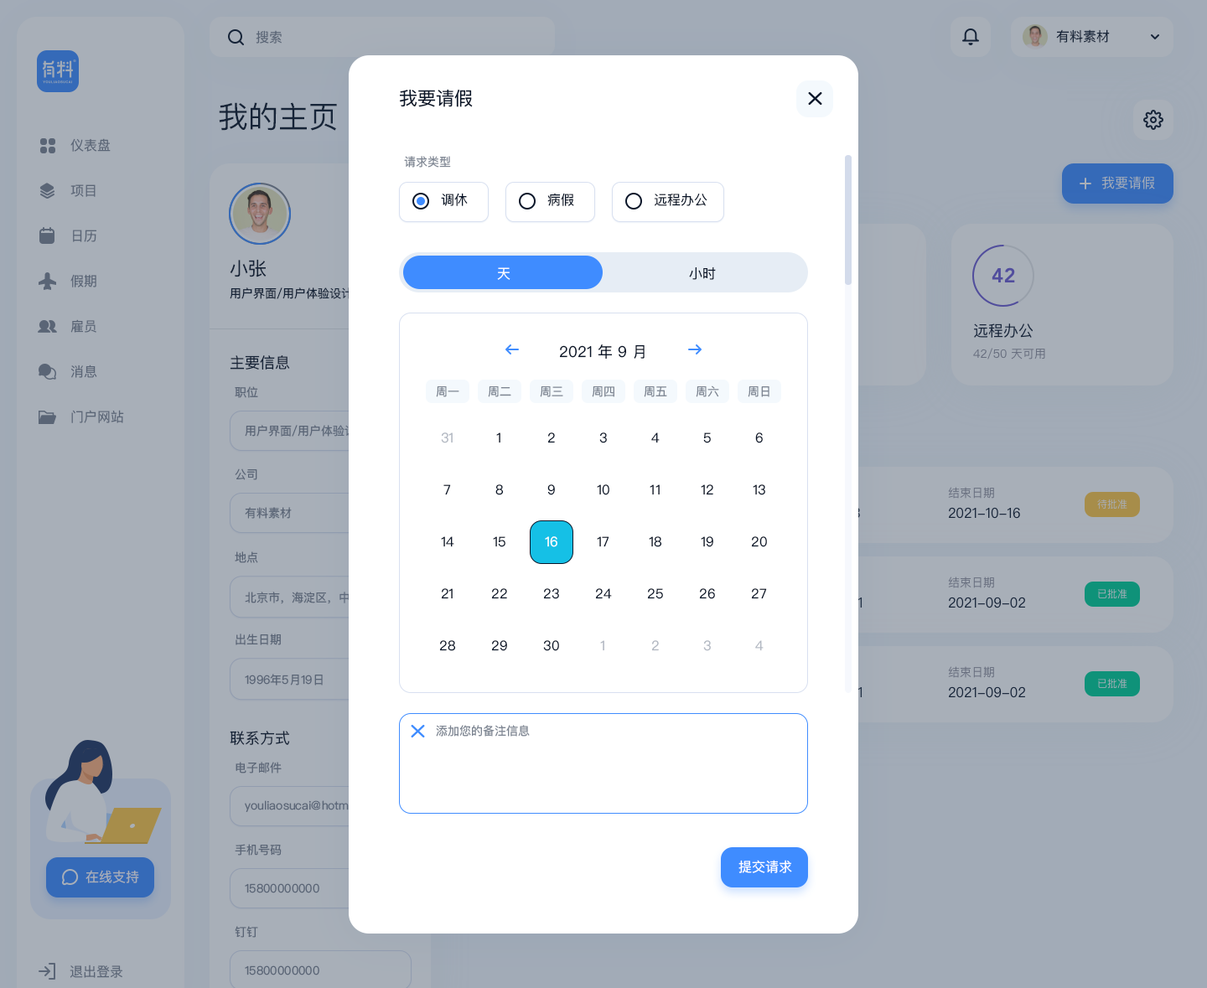
<style>
.page{position:relative;width:1207px;height:988px;background:#ffffff}
.page>*{position:absolute;margin:0}
.t1{font:18.4px "PingFangSC-Regular";color:#0a1629}
.t2{font:11.7px "PingFangSC-Regular";color:#7d8592}
.t3{font:13.4px "PingFangSC-Regular";color:#0a1629}
.t4{font:13.4px "PingFangSC-Regular";color:#ffffff}
.t5{font:15.1px "PingFangSC-Regular";color:#0a1629}
.t6{font:13.4px "PingFangSC-Regular";color:#b2b8c2}
</style>
<div class="page">
<p class="t1" style="left:400px;top:89px;width:73px;height:18px">我要请假</p>
<p class="t2" style="left:404px;top:156px;width:47px;height:12px">请求类型</p>
<p class="t3" style="left:441px;top:193px;width:27px;height:13px">调休</p>
<p class="t3" style="left:547px;top:193px;width:27px;height:13px">病假</p>
<p class="t3" style="left:654px;top:193px;width:53px;height:13px">远程办公</p>
<p class="t4" style="left:497px;top:267px;width:13px;height:13px">天</p>
<p class="t3" style="left:689px;top:267px;width:27px;height:13px">小时</p>
<p class="t5" style="left:560px;top:344px;width:84px;height:15px">2021 年 9 月</p>
<p class="t2" style="left:436px;top:386px;width:23px;height:11px">周一</p>
<p class="t2" style="left:488px;top:386px;width:23px;height:11px">周二</p>
<p class="t2" style="left:540px;top:386px;width:23px;height:11px">周三</p>
<p class="t2" style="left:592px;top:386px;width:22px;height:11px">周四</p>
<p class="t2" style="left:644px;top:386px;width:23px;height:11px">周五</p>
<p class="t2" style="left:696px;top:386px;width:23px;height:11px">周六</p>
<p class="t2" style="left:748px;top:386px;width:21px;height:11px">周日</p>
<p class="t6" style="left:441px;top:432px;width:12px;height:11px">31</p>
<p class="t3" style="left:496px;top:432px;width:4px;height:11px">1</p>
<p class="t3" style="left:547px;top:432px;width:8px;height:11px">2</p>
<p class="t3" style="left:599px;top:432px;width:8px;height:11px">3</p>
<p class="t3" style="left:651px;top:432px;width:9px;height:11px">4</p>
<p class="t3" style="left:703px;top:432px;width:8px;height:11px">5</p>
<p class="t3" style="left:755px;top:432px;width:8px;height:11px">6</p>
<p class="t3" style="left:443px;top:484px;width:8px;height:11px">7</p>
<p class="t3" style="left:495px;top:484px;width:8px;height:11px">8</p>
<p class="t3" style="left:547px;top:484px;width:8px;height:11px">9</p>
<p class="t3" style="left:597px;top:484px;width:12px;height:11px">10</p>
<p class="t3" style="left:650px;top:484px;width:10px;height:11px">11</p>
<p class="t3" style="left:701px;top:484px;width:12px;height:11px">12</p>
<p class="t3" style="left:753px;top:484px;width:12px;height:11px">13</p>
<p class="t3" style="left:441px;top:536px;width:13px;height:11px">14</p>
<p class="t3" style="left:493px;top:536px;width:12px;height:11px">15</p>
<p class="t4" style="left:545px;top:536px;width:12px;height:11px">16</p>
<p class="t3" style="left:597px;top:536px;width:12px;height:11px">17</p>
<p class="t3" style="left:649px;top:536px;width:12px;height:11px">18</p>
<p class="t3" style="left:701px;top:536px;width:12px;height:11px">19</p>
<p class="t3" style="left:751px;top:536px;width:16px;height:11px">20</p>
<p class="t3" style="left:441px;top:588px;width:12px;height:11px">21</p>
<p class="t3" style="left:491px;top:588px;width:16px;height:11px">22</p>
<p class="t3" style="left:543px;top:588px;width:16px;height:11px">23</p>
<p class="t3" style="left:595px;top:588px;width:17px;height:11px">24</p>
<p class="t3" style="left:647px;top:588px;width:16px;height:11px">25</p>
<p class="t3" style="left:699px;top:588px;width:16px;height:11px">26</p>
<p class="t3" style="left:751px;top:588px;width:16px;height:11px">27</p>
<p class="t3" style="left:439px;top:640px;width:16px;height:11px">28</p>
<p class="t3" style="left:491px;top:640px;width:16px;height:11px">29</p>
<p class="t3" style="left:543px;top:640px;width:16px;height:11px">30</p>
<p class="t6" style="left:600px;top:640px;width:4px;height:11px">1</p>
<p class="t6" style="left:651px;top:640px;width:8px;height:11px">2</p>
<p class="t6" style="left:703px;top:640px;width:8px;height:11px">3</p>
<p class="t6" style="left:755px;top:640px;width:8px;height:11px">4</p>
<p class="t2" style="left:436px;top:725px;width:94px;height:12px">添加您的备注信息</p>
<p class="t4" style="left:738px;top:860px;width:54px;height:13px">提交请求</p>
</div>
